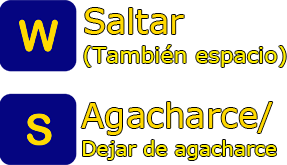
<style>
.page{position:relative;width:287px;height:165px;background:#ffffff}
.page>*{position:absolute;margin:0}
.t1{font:22px "Verdana";color:#fff000}
.t2{font:34px "Verdana";color:#ffd900}
.t3{font:20px "Verdana";color:#fff000}
</style>
<div class="page">
<p class="t1" style="left:84px;top:8px;width:202px;height:59px"><span class="t2">Saltar<br></span>(También espacio)</p>
<p class="t3" style="left:81px;top:102px;width:195px;height:58px"><span class="t2">Agacharce/<br></span>Dejar de agacharce</p>
</div>
